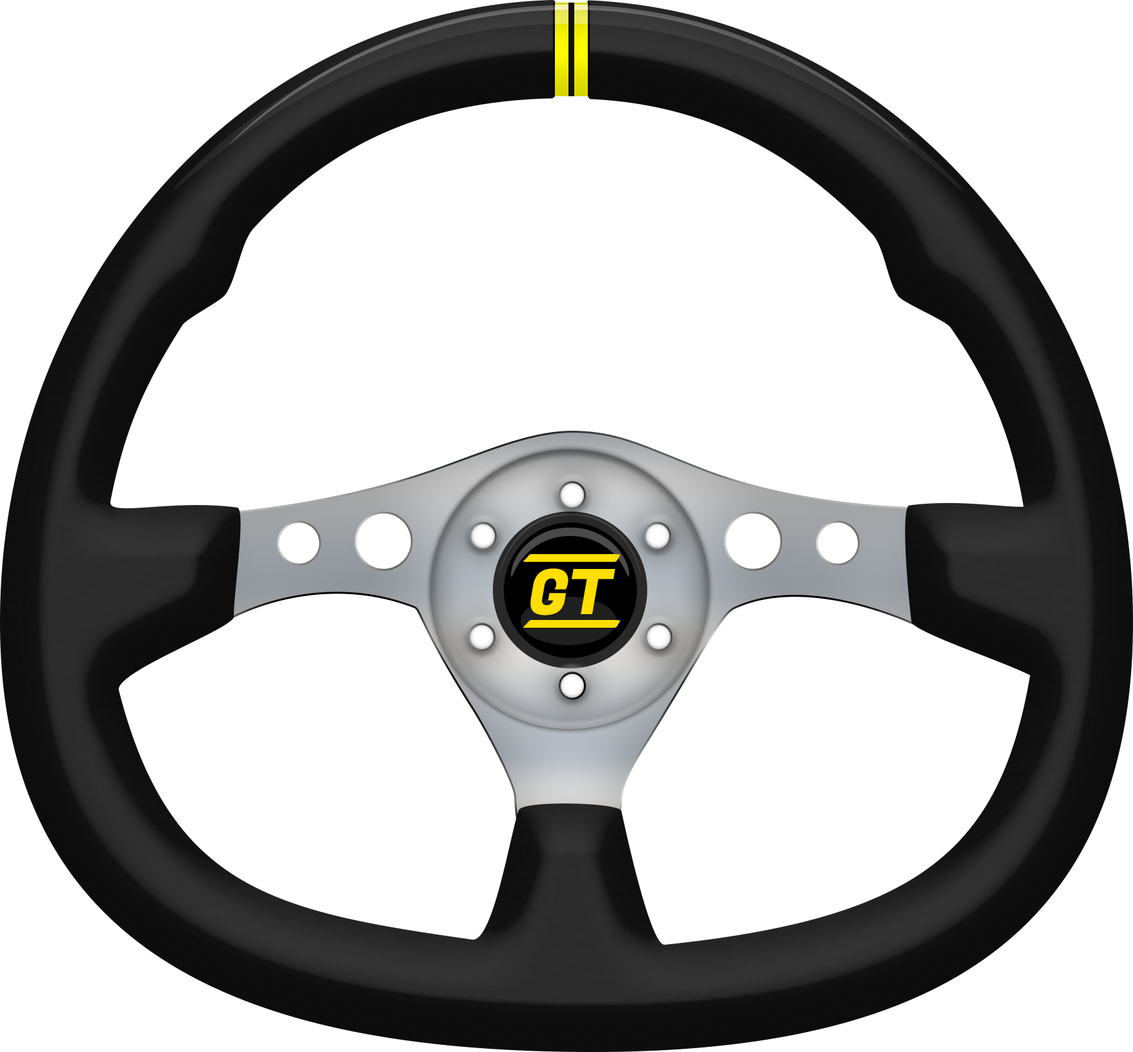
<style>
.page{position:relative;width:1133px;height:1052px;background:#ffffff}
.page>*{position:absolute;margin:0}
.t1{font:62.5px "FugazOne-Regular";color:#ffde00}
</style>
<div class="page">
<p class="t1" style="left:530px;top:568px;width:86px;height:48px">GT</p>
</div>
